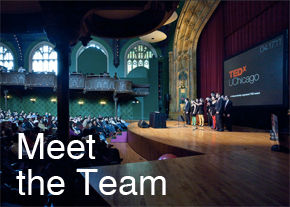
<style>
.page{position:relative;width:290px;height:207px}
.page>*{position:absolute;margin:0}
.t1{font:36px/36px "Helvetica";color:#ffffff}
</style>
<div class="page">
<p class="t1" style="left:16px;top:133px;width:150px;height:62px">Meet <br>the Team</p>
</div>
